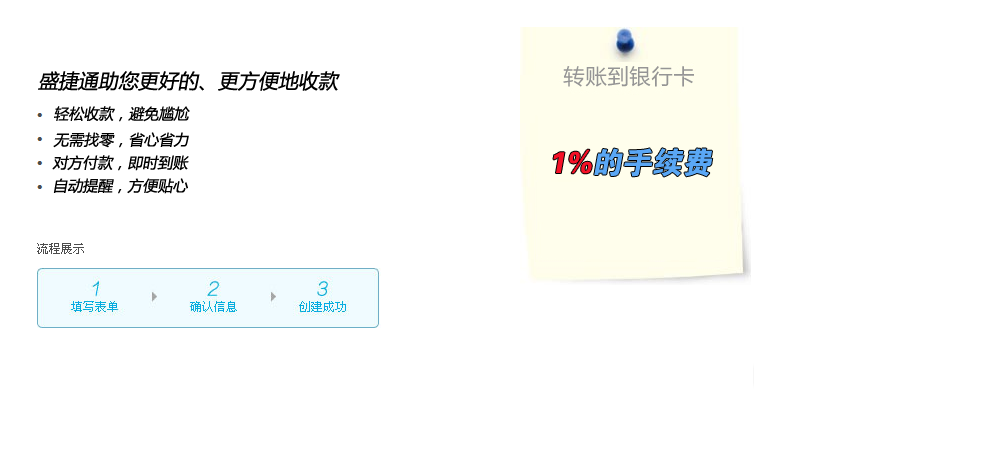
<style>
.page{position:relative;width:1002px;height:453px;background:#ffffff}
.page>*{position:absolute;margin:0}
.t1{font:20px "MicrosoftYaHei";color:#000000;font-style:italic}
.t2{font:15px "MicrosoftYaHei";color:#000000;font-style:italic}
.t3{font:30px "FZDHTJW--GB1-0";color:#5aa7f5;font-style:italic}
.t4{font:30px "FZDHTJW--GB1-0";color:#f61127;font-style:italic}
</style>
<div class="page">
<p class="t1" style="left:38px;top:71px;width:302px;height:20px">盛捷通助您更好的、更方便地收款</p>
<p class="t2" style="left:54px;top:106px;width:136px;height:16px">轻松收款，避免尴尬</p>
<p class="t2" style="left:53px;top:132px;width:136px;height:16px">无需找零，省心省力</p>
<p class="t3" style="left:553px;top:148px;width:160px;height:29px"><span class="t4">1%</span>的手续费</p>
<p class="t2" style="left:52px;top:155px;width:137px;height:16px">对方付款，即时到账</p>
<p class="t2" style="left:53px;top:178px;width:135px;height:16px">自动提醒，方便贴心</p>
</div>
